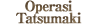
<style>
.page{position:relative;width:95px;height:26px;background:#ffffff}
.page>*{position:absolute;margin:0}
.t1{font:14px/12px "RyuminPro-ExBold";letter-spacing:-0.08em;color:#6b563e;font-weight:bold}
</style>
<div class="page">
<p class="t1" style="left:16px;top:0px;width:66px;height:24px;text-align:center">Operasi<br>Tatsumaki</p>
</div>
